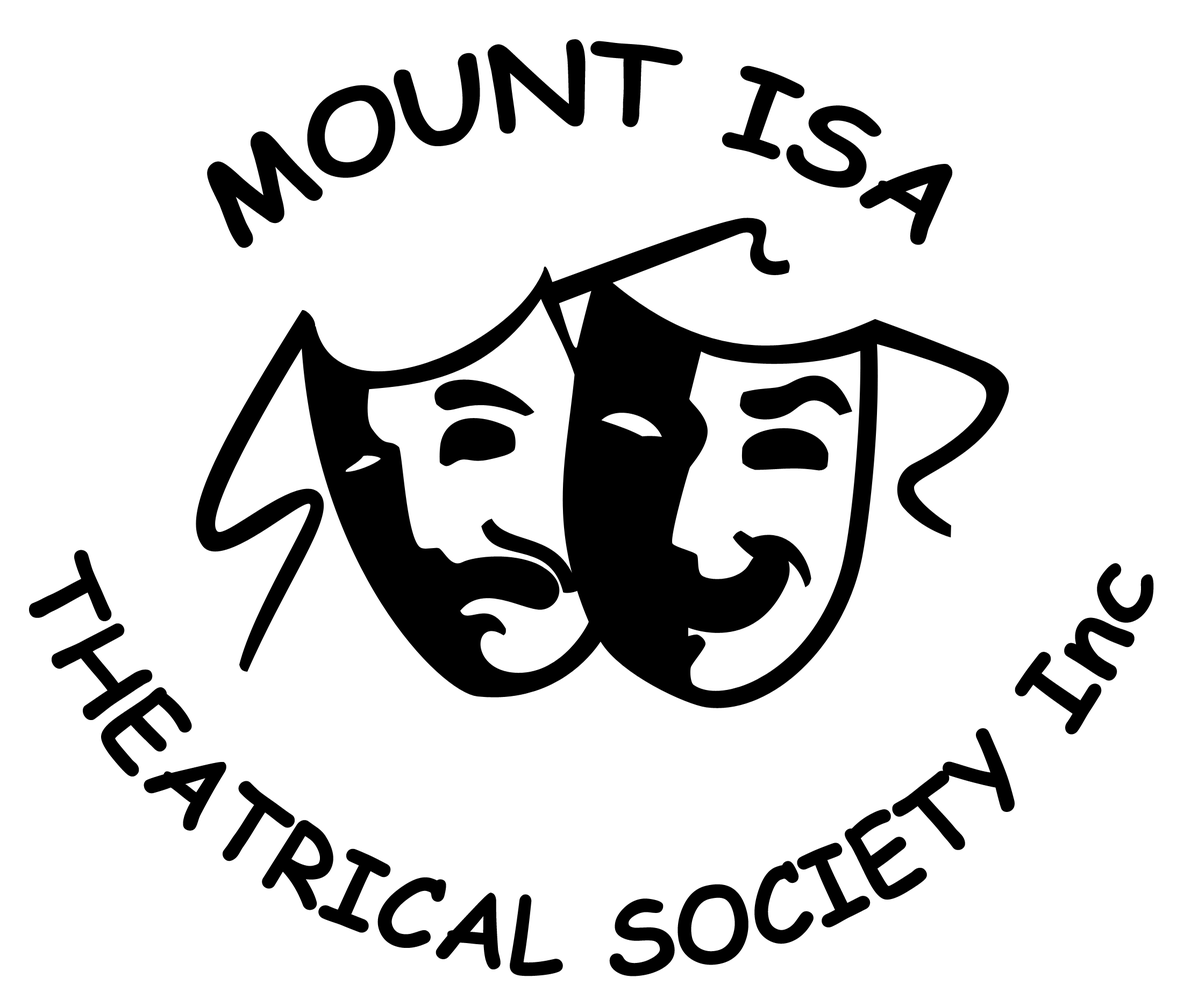
<style>
.page{position:relative;width:1184px;height:1007px;background:#ffffff}
.page>*{position:absolute;margin:0}
.t1{font:112.9px "ComicSansMS-Bold";color:#000000;scale:0.9 1}
.t2{font:102.1px "ComicSansMS-Bold";color:#000000;scale:0.7 1}
</style>
<div class="page">
<p class="t1" style="left:207px;top:39px;width:746px;height:209px;text-align:center">MOUNT ISA</p>
<p class="t2" style="left:29px;top:550px;width:1125px;height:427px;text-align:center">THEATRICAL SOCIETY Inc</p>
</div>
